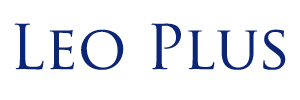
<style>
.page{position:relative;width:300px;height:100px;background:#ffffff}
.page>*{position:absolute;margin:0}
.t1{font:60px "TrajanPro-Regular";color:#0c2577}
</style>
<div class="page">
<p class="t1" style="left:14px;top:23px;width:272px;height:47px">Leo Plus</p>
</div>
